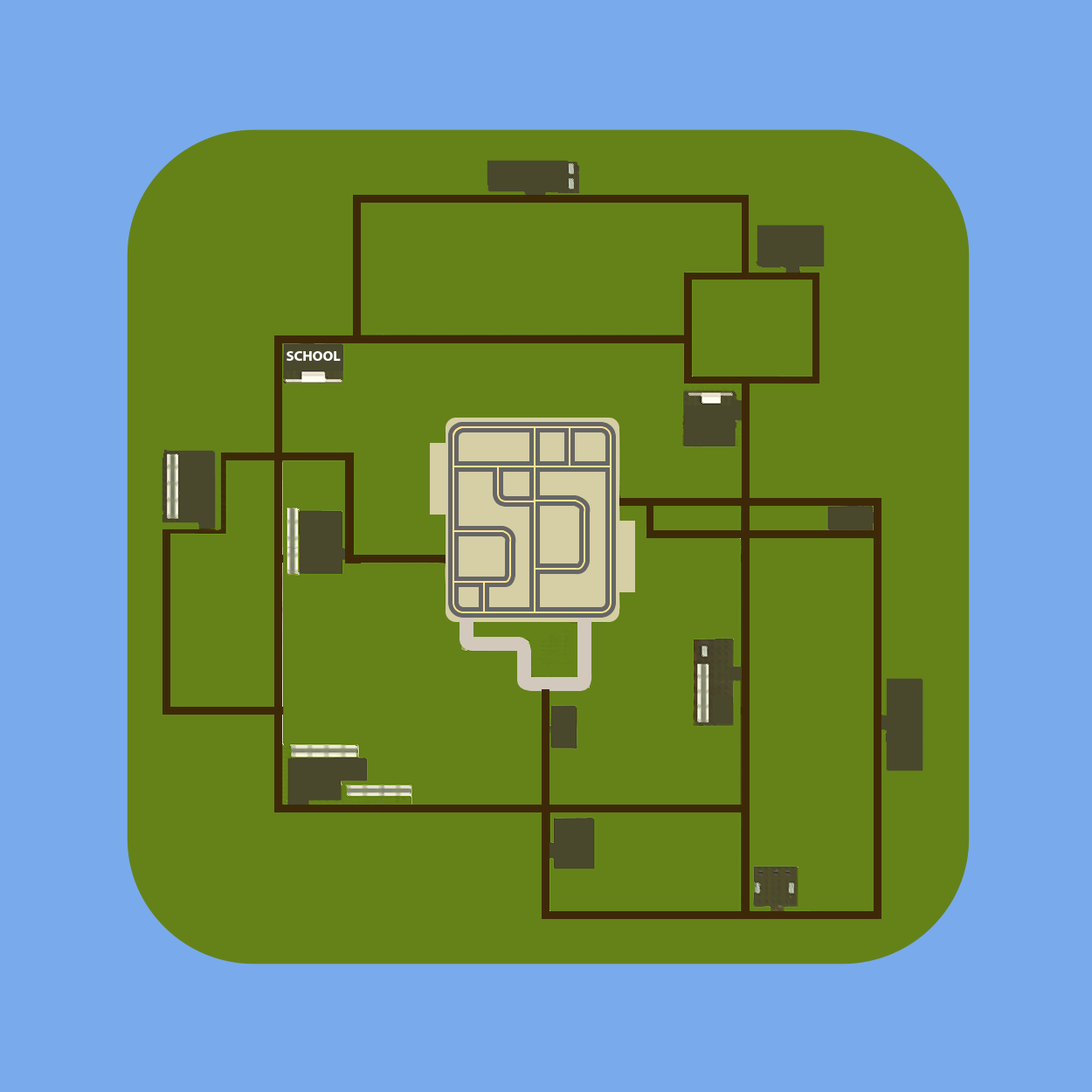
<style>
.page{position:relative;width:1092px;height:1092px;background:#658219}
.page>*{position:absolute;margin:0}
.t1{font:14.1px "MyriadHebrew-Bold";color:#ffffff;text-transform:uppercase}
</style>
<div class="page">
<p class="t1" style="left:287px;top:351px;width:54px;height:10px">SCHOOL</p>
</div>
